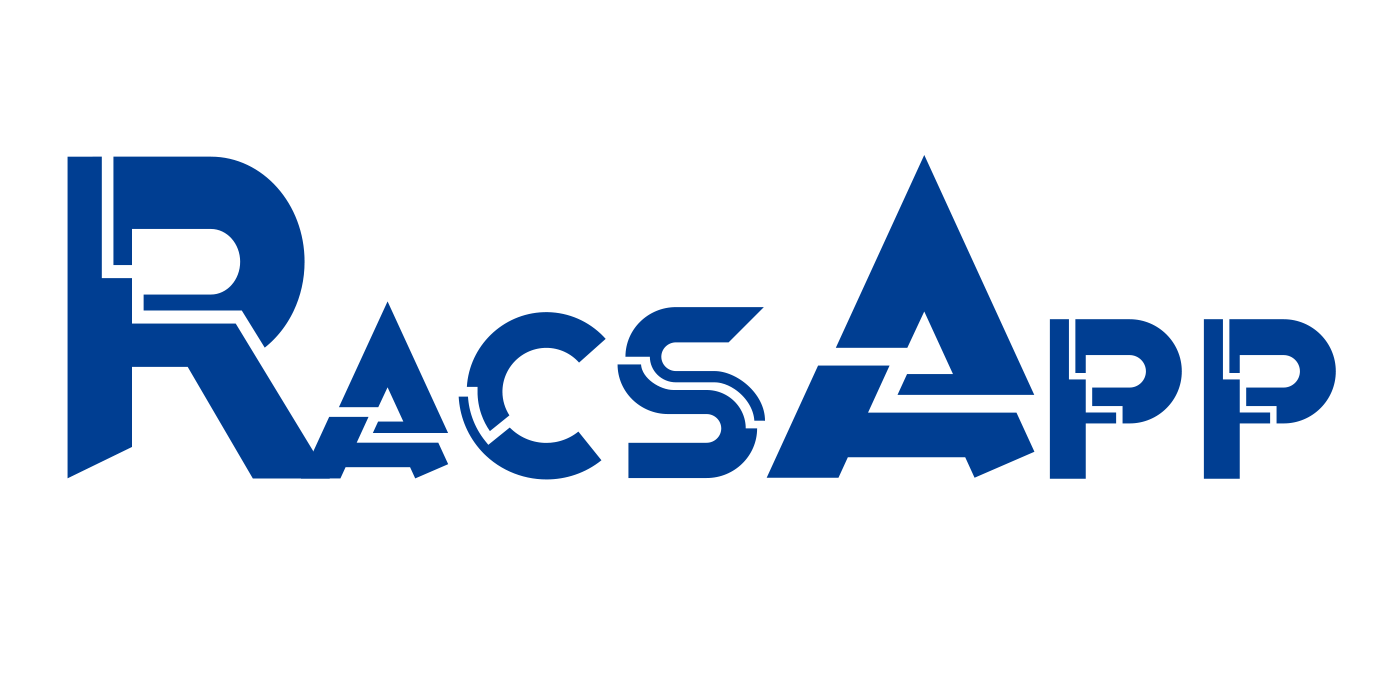
<style>
.page{position:relative;width:1400px;height:700px;background:#ffffff}
.page>*{position:absolute;margin:0}
.t1{font:479.4px "OriginTechDemoRegular";color:#003e92;scale:0.89 1}
.t2{font:433.4px "OriginTechDemoRegular";color:#003e92}
.t3{font:237.6px "OriginTechDemoRegular";color:#003e92}
</style>
<div class="page">
<p class="t1" style="left:67px;top:156px;width:263px;height:323px">r</p>
<p class="t2" style="left:766px;top:155px;width:269px;height:323px">A</p>
<p class="t3" style="left:300px;top:301px;width:465px;height:179px">ACS</p>
<p class="t3" style="left:1049px;top:319px;width:287px;height:160px">pp</p>
</div>
